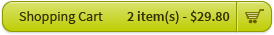
<style>
.page{position:relative;width:274px;height:35px}
.page>*{position:absolute;margin:0}
.t1{font:14px "SourceSansPro-Regular";color:#333000}
.t2{font:14px "SourceSansPro-Semibold";color:#333000}
</style>
<div class="page">
<p class="t1" style="left:19px;top:11px;width:84px;height:13px">Shopping Cart</p>
<p class="t2" style="left:127px;top:10px;width:103px;height:14px">2 item(s) - $29.80</p>
</div>
